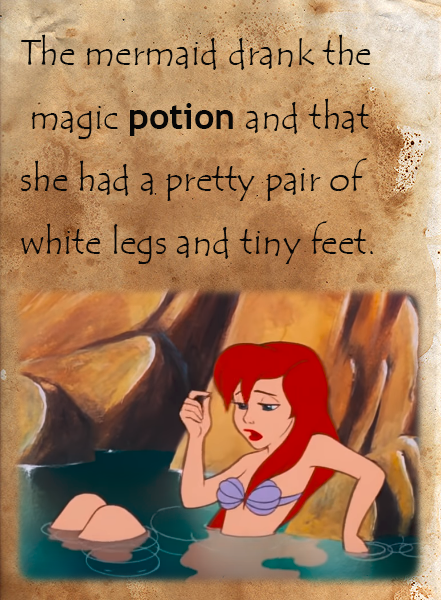
<style>
.page{position:relative;width:441px;height:600px}
.page>*{position:absolute;margin:0}
.t1{font:36px "TempusSansITC";color:#070707}
.t2{font:36px "TrebuchetMS-Bold";color:#070707}
</style>
<div class="page">
<p class="t1" style="left:21px;top:34px;width:352px;height:230px">The mermaid drank the<br> magic <span class="t2">potion</span> and that <br>she had a pretty pair of <br>white legs and tiny feet.</p>
</div>
